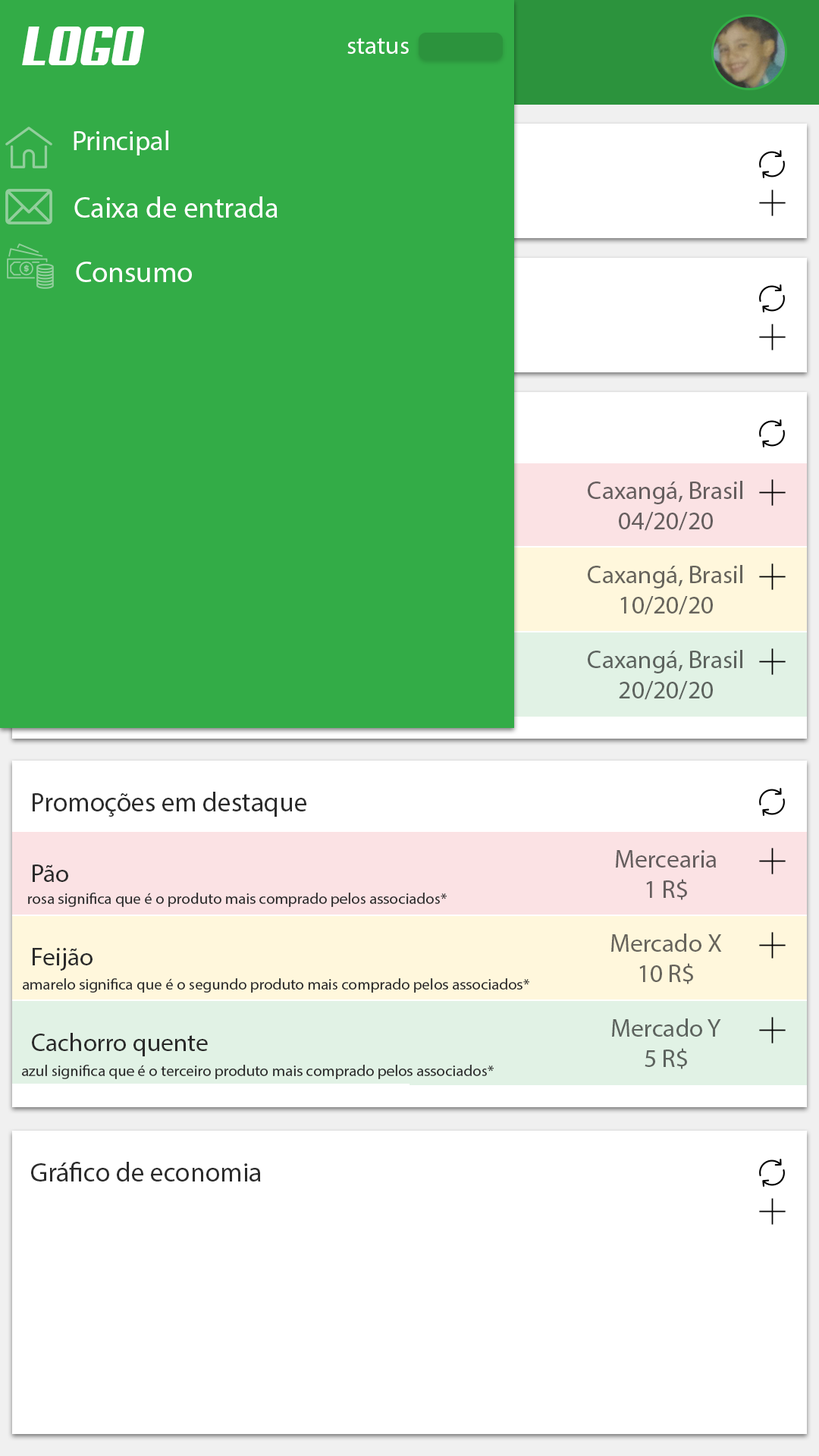
<style>
.page{position:relative;width:819px;height:1456px;background:#ffffff}
.page>*{position:absolute;margin:0}
.t1{font:55.8px "Aero";color:#ffffff;scale:0.82 1}
.t2{font:25.3px "MyriadPro-Regular";color:#ffffff}
.t3{font:27.2px "MyriadPro-Regular";color:#ffffff}
.t4{font:29.5px "MyriadPro-Regular";color:#ffffff}
.t5{font:25.3px "MyriadPro-Regular";color:#655e5e}
.t6{font:25.3px "MyriadPro-Regular";color:#67645c}
.t7{font:25.3px "MyriadPro-Regular";color:#5d635e}
.t8{font:26.9px "MyriadPro-Regular";color:#2b2b2b}
.t9{font:25.3px "MyriadPro-Regular";color:#2a2a2a}
.t10{font:15.8px "MyriadPro-Regular";color:#2a2a2a}
</style>
<div class="page">
<p class="t1" style="left:22px;top:27px;width:122px;height:38px">LOGO</p>
<p class="t2" style="left:347px;top:38px;width:62px;height:16px">status</p>
<p class="t3" style="left:74px;top:130px;width:94px;height:25px">Principal</p>
<p class="t4" style="left:74px;top:196px;width:204px;height:22px">Caixa de entrada</p>
<p class="t4" style="left:76px;top:262px;width:116px;height:20px">Consumo</p>
<p class="t5" style="left:588px;top:481px;width:154px;height:50px;text-align:center">Caxangá, Brasil<br>04/20/20</p>
<p class="t6" style="left:588px;top:565px;width:154px;height:50px;text-align:center">Caxangá, Brasil<br>10/20/20</p>
<p class="t7" style="left:588px;top:650px;width:154px;height:50px;text-align:center">Caxangá, Brasil<br>20/20/20</p>
<p class="t8" style="left:33px;top:792px;width:273px;height:25px">Promoções em destaque</p>
<p class="t5" style="left:616px;top:850px;width:100px;height:50px;text-align:center">Mercearia<br>1 R$</p>
<p class="t9" style="left:33px;top:864px;width:35px;height:18px">Pão</p>
<p class="t10" style="left:28px;top:893px;width:419px;height:14px">rosa significa que é o produto mais comprado pelos associados*</p>
<p class="t6" style="left:611px;top:933px;width:111px;height:51px;text-align:center">Mercado X<br>10 R$</p>
<p class="t9" style="left:33px;top:948px;width:60px;height:23px">Feijão</p>
<p class="t10" style="left:22px;top:978px;width:507px;height:15px">amarelo significa que é o segundo produto mais comprado pelos associados*</p>
<p class="t7" style="left:612px;top:1018px;width:109px;height:51px;text-align:center">Mercado Y<br>5 R$</p>
<p class="t9" style="left:32px;top:1033px;width:176px;height:23px">Cachorro quente</p>
<p class="t10" style="left:21px;top:1065px;width:473px;height:14px">azul significa que é o terceiro produto mais comprado pelos associados*</p>
<p class="t8" style="left:31px;top:1162px;width:230px;height:19px">Gráfico de economia</p>
</div>
